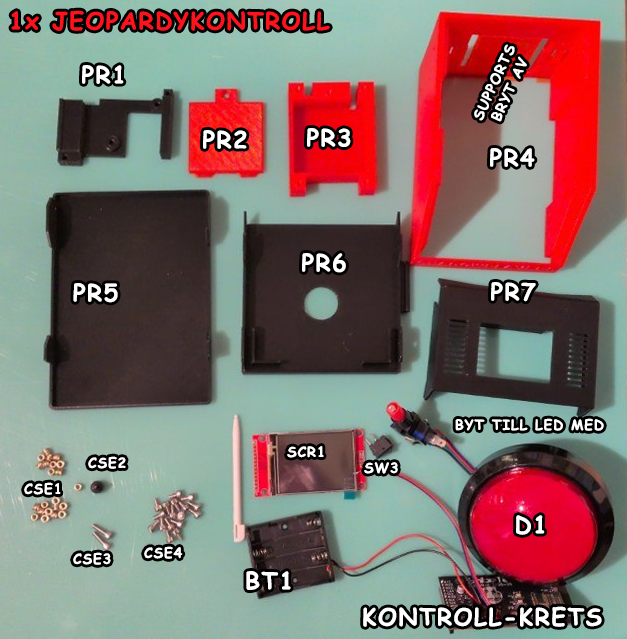
<style>
.page{position:relative;width:627px;height:639px}
.page>*{position:absolute;margin:0}
.t1{font:23.7px "ComicSansMS-Bold";letter-spacing:0.06em;color:#fb131e}
.t2{font:14.2px "ComicSansMS-Bold";letter-spacing:0.06em;color:#ffffff}
.t3{font:23.7px "ComicSansMS-Bold";letter-spacing:0.06em;color:#ffffff}
.t4{font:14px "ComicSansMS-Bold";letter-spacing:0.06em;color:#ffffff}
</style>
<div class="page">
<p class="t1" style="left:11px;top:10px;width:319px;height:21px">1x JEOPARDYKONTROLL</p>
<p class="t2" style="left:474px;top:44px;width:53px;height:78px;text-align:center;rotate:-65deg">SUPPORTS<br>BRYT AV</p>
<p class="t3" style="left:82px;top:65px;width:42px;height:19px">PR1</p>
<p class="t3" style="left:203px;top:130px;width:44px;height:19px">PR2</p>
<p class="t3" style="left:307px;top:128px;width:44px;height:19px">PR3</p>
<p class="t3" style="left:490px;top:148px;width:45px;height:19px">PR4</p>
<p class="t3" style="left:302px;top:253px;width:44px;height:20px">PR6</p>
<p class="t3" style="left:73px;top:283px;width:45px;height:20px">PR5</p>
<p class="t3" style="left:491px;top:282px;width:45px;height:20px">PR7</p>
<p class="t4" style="left:455px;top:418px;width:149px;height:13px">BYT TILL LED MED</p>
<p class="t4" style="left:287px;top:446px;width:37px;height:12px">SCR1</p>
<p class="t4" style="left:88px;top:456px;width:38px;height:13px">CSE2</p>
<p class="t4" style="left:364px;top:462px;width:34px;height:12px">SW3</p>
<p class="t4" style="left:24px;top:482px;width:37px;height:13px">CSE1</p>
<p class="t3" style="left:516px;top:515px;width:29px;height:20px">D1</p>
<p class="t4" style="left:73px;top:552px;width:38px;height:13px">CSE3</p>
<p class="t4" style="left:144px;top:546px;width:39px;height:13px">CSE4</p>
<p class="t3" style="left:246px;top:571px;width:45px;height:19px">BT1</p>
<p class="t3" style="left:363px;top:606px;width:239px;height:21px">KONTROLL-KRETS</p>
</div>
